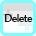
<style>
.page{position:relative;width:36px;height:36px;background:#77ffff}
.page>*{position:absolute;margin:0}
.t1{font:10.7px "AmiraParadiso";letter-spacing:-0.05em;color:#000000}
</style>
<div class="page">
<p class="t1" style="left:4px;top:14px;width:29px;height:8px;opacity:0.96">Delete</p>
</div>
